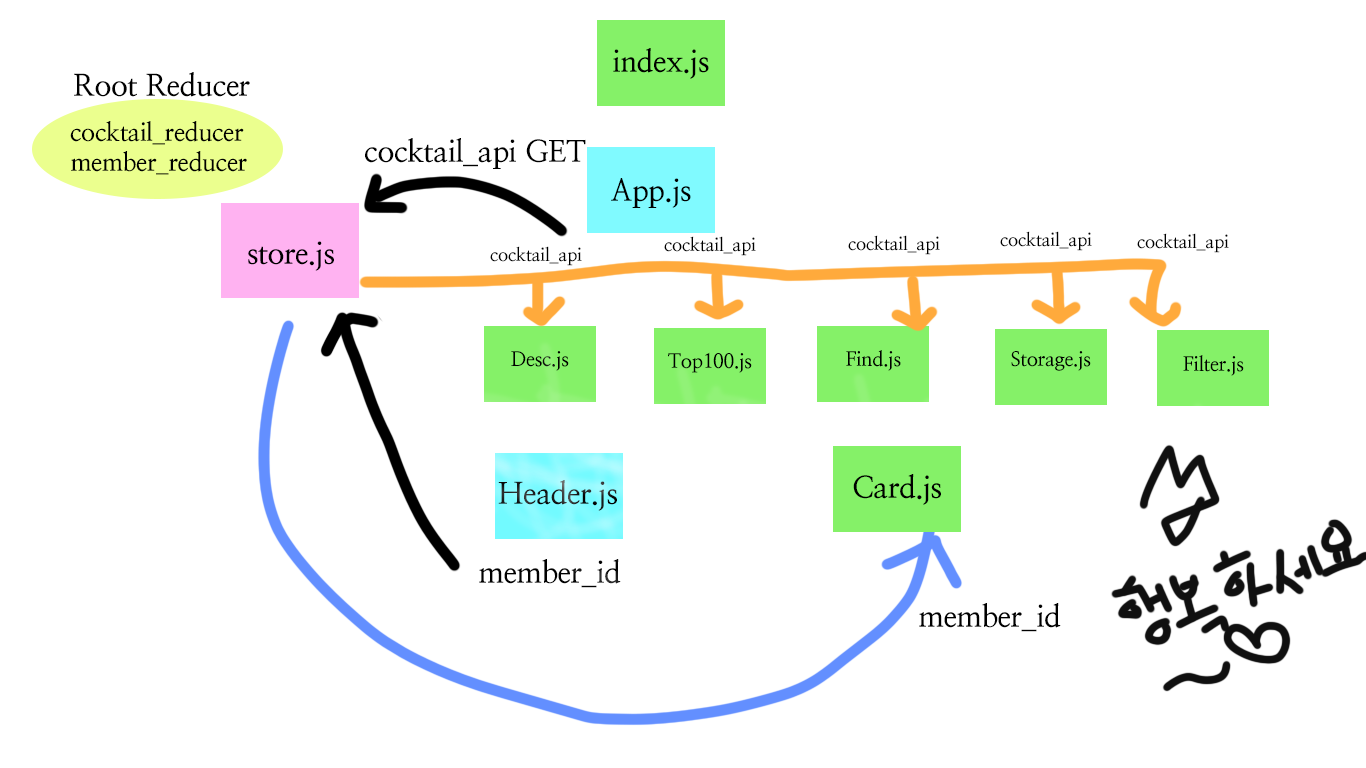
<style>
.page{position:relative;width:1366px;height:768px;background:#ffffff}
.page>*{position:absolute;margin:0}
.t1{font:30px "NanumMyeongjoBold";letter-spacing:-0.015em;color:#000000}
.t2{font:25px "NanumMyeongjoBold";letter-spacing:-0.015em;color:#000000}
.t3{font:18px "NanumMyeongjoBold";letter-spacing:-0.015em;color:#000000}
.t4{font:20px "NanumMyeongjoBold";letter-spacing:-0.015em;color:#000000}
.t5{font:30px "NanumMyeongjoBold";letter-spacing:-0.015em}
</style>
<div class="page">
<p class="t1" style="left:613px;top:48px;width:96px;height:31px">index.js</p>
<p class="t1" style="left:74px;top:72px;width:176px;height:25px">Root Reducer</p>
<p class="t2" style="left:70px;top:121px;width:174px;height:24px">cocktail_reducer</p>
<p class="t1" style="left:365px;top:138px;width:221px;height:31px">cocktail_api GET</p>
<p class="t2" style="left:71px;top:151px;width:176px;height:24px">member_reducer</p>
<p class="t1" style="left:611px;top:178px;width:80px;height:30px">App.js</p>
<p class="t3" style="left:1000px;top:231px;width:92px;height:20px">cocktail_api</p>
<p class="t3" style="left:1137px;top:233px;width:92px;height:20px">cocktail_api</p>
<p class="t1" style="left:248px;top:241px;width:86px;height:30px">store.js</p>
<p class="t3" style="left:490px;top:246px;width:92px;height:20px">cocktail_api</p>
<p class="t3" style="left:664px;top:236px;width:92px;height:20px">cocktail_api</p>
<p class="t3" style="left:848px;top:235px;width:92px;height:20px">cocktail_api</p>
<p class="t4" style="left:511px;top:351px;width:58px;height:20px">Desc.js</p>
<p class="t4" style="left:668px;top:352px;width:84px;height:21px">Top100.js</p>
<p class="t4" style="left:846px;top:350px;width:55px;height:21px">Find.js</p>
<p class="t4" style="left:1011px;top:351px;width:80px;height:20px">Storage.js</p>
<p class="t4" style="left:1183px;top:355px;width:61px;height:21px">Filter.js</p>
<p class="t5" style="left:498px;top:480px;width:119px;height:31px">Header.js</p>
<p class="t1" style="left:853px;top:474px;width:88px;height:31px">Card.js</p>
<p class="t1" style="left:479px;top:559px;width:142px;height:29px">member_id</p>
<p class="t1" style="left:919px;top:603px;width:142px;height:29px">member_id</p>
</div>
